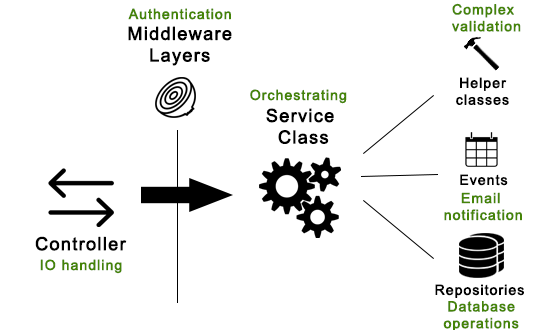
<style>
.page{position:relative;width:544px;height:330px;background:#ffffff}
.page>*{position:absolute;margin:0}
.t1{font:14px "ArialMT";letter-spacing:0.05em;color:#458407;font-weight:bold}
.t2{font:18px "ArialMT";letter-spacing:0.05em;color:#000000;font-weight:bold}
.t3{font:14px "ArialMT";letter-spacing:0.05em;color:#000000;font-weight:bold}
</style>
<div class="page">
<p class="t1" style="left:452px;top:3px;width:69px;height:29px">Complex<br>validation</p>
<p class="t1" style="left:128px;top:8px;width:103px;height:12px">Authentication</p>
<p class="t2" style="left:128px;top:26px;width:104px;height:40px;text-align:center">Middleware<br>Layers</p>
<p class="t3" style="left:456px;top:77px;width:53px;height:28px;text-align:center">Helper<br>classes</p>
<p class="t1" style="left:250px;top:89px;width:97px;height:15px">Orchestrating</p>
<p class="t2" style="left:266px;top:108px;width:68px;height:36px;text-align:center">Service <br>Class</p>
<p class="t3" style="left:460px;top:174px;width:48px;height:12px">Events</p>
<p class="t1" style="left:444px;top:192px;width:78px;height:29px;text-align:center">Email <br>notification</p>
<p class="t2" style="left:35px;top:236px;width:92px;height:15px">Controller</p>
<p class="t1" style="left:40px;top:259px;width:82px;height:15px">IO handling</p>
<p class="t3" style="left:435px;top:284px;width:89px;height:14px">Repositories</p>
<p class="t1" style="left:443px;top:301px;width:76px;height:31px;text-align:center">Database<br>operations</p>
</div>
